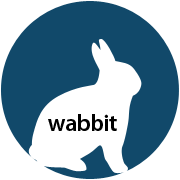
<style>
.page{position:relative;width:180px;height:180px;background:#11496a}
.page>*{position:absolute;margin:0}
.t1{font:24px "MyriadPro-Semibold";letter-spacing:-0.025em;color:#000000}
</style>
<div class="page">
<p class="t1" style="left:48px;top:114px;width:69px;height:17px">wabbit</p>
</div>
